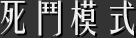
<style>
.page{position:relative;width:136px;height:38px;background:#333333}
.page>*{position:absolute;margin:0}
.t1{font:36.4px "FZYTK--GBK1-0";color:#efefef}
</style>
<div class="page">
<p class="t1" style="left:0px;top:0px;width:134px;height:36px">死鬥模式</p>
</div>
